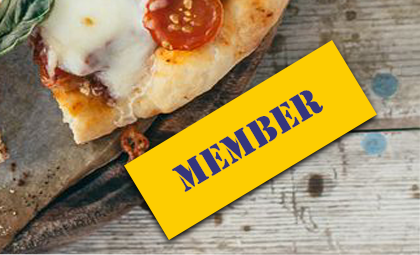
<style>
.page{position:relative;width:420px;height:255px}
.page>*{position:absolute;margin:0}
.t1{font:40px "Stencil";color:#35357c}
</style>
<div class="page">
<p class="t1" style="left:172px;top:90px;width:151px;height:102px;rotate:-31deg">MEMBER</p>
</div>
